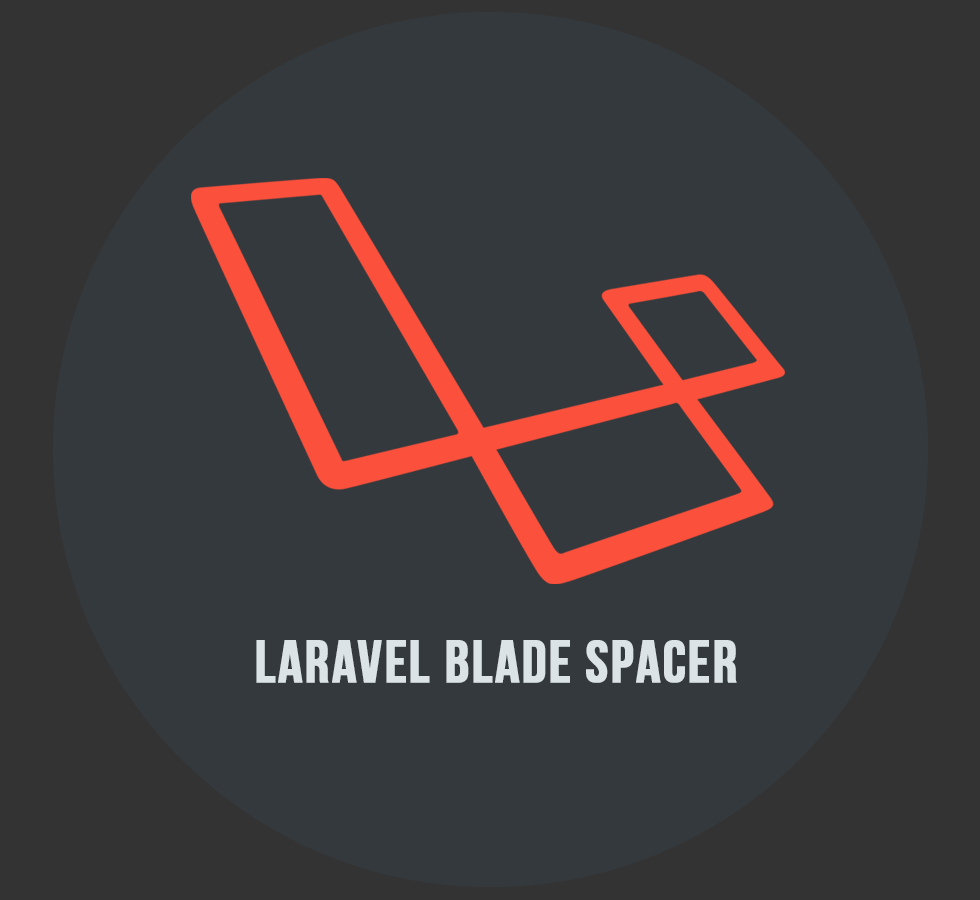
<style>
.page{position:relative;width:980px;height:900px;background:#33393d}
.page>*{position:absolute;margin:0}
.t1{font:59px "BebasNeue";letter-spacing:0.025em;color:#dce3e7;font-weight:bold}
</style>
<div class="page">
<p class="t1" style="left:256px;top:640px;width:481px;height:43px">Laravel Blade Spacer</p>
</div>
